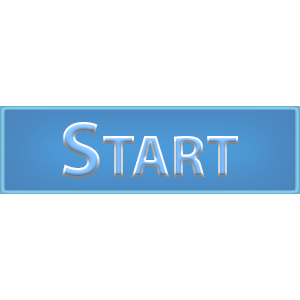
<style>
.page{position:relative;width:300px;height:300px;background:#ffffff}
.page>*{position:absolute;margin:0}
.t1{font:60px "MyriadPro-Bold"}
.t2{font:80px "MyriadPro-Bold"}
</style>
<div class="page">
<p class="t1" style="left:62px;top:122px;width:176px;height:56px"><span class="t2">S</span>TART</p>
</div>
